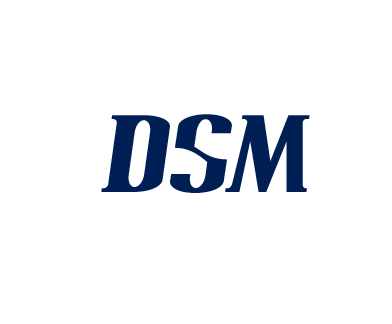
<style>
.page{position:relative;width:392px;height:324px;background:#ffffff}
.page>*{position:absolute;margin:0}
.t1{font:96px "Arnprior";color:#001f55}
</style>
<div class="page">
<p class="t1" style="left:101px;top:114px;width:209px;height:79px">DSM</p>
</div>
